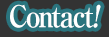
<style>
.page{position:relative;width:109px;height:37px;background:#333333}
.page>*{position:absolute;margin:0}
.t1{font:30px "RyuminPro-ExBold";letter-spacing:-0.08em;color:#ffffff;scale:0.9 1}
.t2{font:30px "RyuminPro-ExBold";letter-spacing:-0.08em;color:#ffffff;font-style:italic;scale:0.9 1}
</style>
<div class="page">
<p class="t1" style="left:10px;top:4px;width:91px;height:24px">Contact<span class="t2">!</span></p>
</div>
